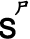
<style>
.page{position:relative;width:30px;height:39px;background:#ffffff}
.page>*{position:absolute;margin:0}
.t1{font:18px "DFKaiShu-SB-Estd-BF";color:#000000;font-weight:bold}
.t2{font:27px "ArialMT";color:#000000;font-weight:bold}
</style>
<div class="page">
<p class="t1" style="left:15px;top:0px;width:14px;height:16px">尸</p>
<p class="t2" style="left:0px;top:17px;width:16px;height:22px">S</p>
</div>
